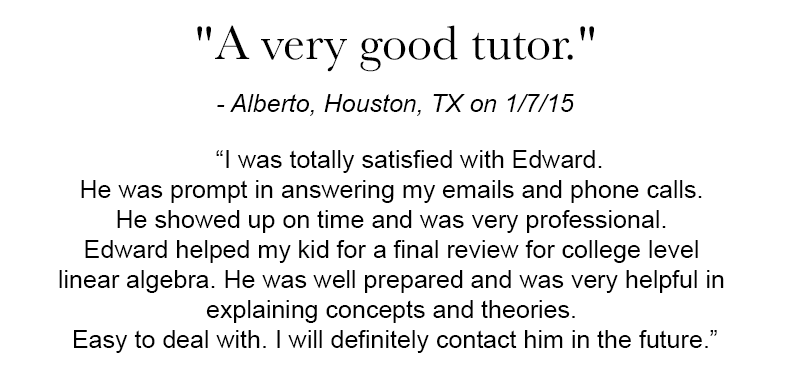
<style>
.page{position:relative;width:790px;height:380px;background:#ffffff}
.page>*{position:absolute;margin:0}
.t1{font:50px "Baskerville";color:#000000}
.t2{font:25px "Arial-ItalicMT";color:#000000}
.t3{font:25px "ArialMT";color:#000000}
</style>
<div class="page">
<p class="t1" style="left:197px;top:25px;width:397px;height:47px">"A very good tutor."</p>
<p class="t2" style="left:217px;top:94px;width:357px;height:22px">- Alberto, Houston, TX on 1/7/15</p>
<p class="t3" style="left:59px;top:150px;width:665px;height:203px;text-align:center">“I was totally satisfied with Edward. <br>He was prompt in answering my emails and phone calls. <br>He showed up on time and was very professional. <br>Edward helped my kid for a final review for college level <br>linear algebra. He was well prepared and was very helpful in <br>explaining concepts and theories. <br>Easy to deal with. I will definitely contact him in the future.”</p>
</div>
